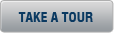
<style>
.page{position:relative;width:114px;height:33px}
.page>*{position:absolute;margin:0}
.t1{font:13.8px "Swiss721BT-BoldCondensedDType";color:#0a3961}
</style>
<div class="page">
<p class="t1" style="left:18px;top:12px;width:75px;height:10px">TAKE A TOUR</p>
</div>
